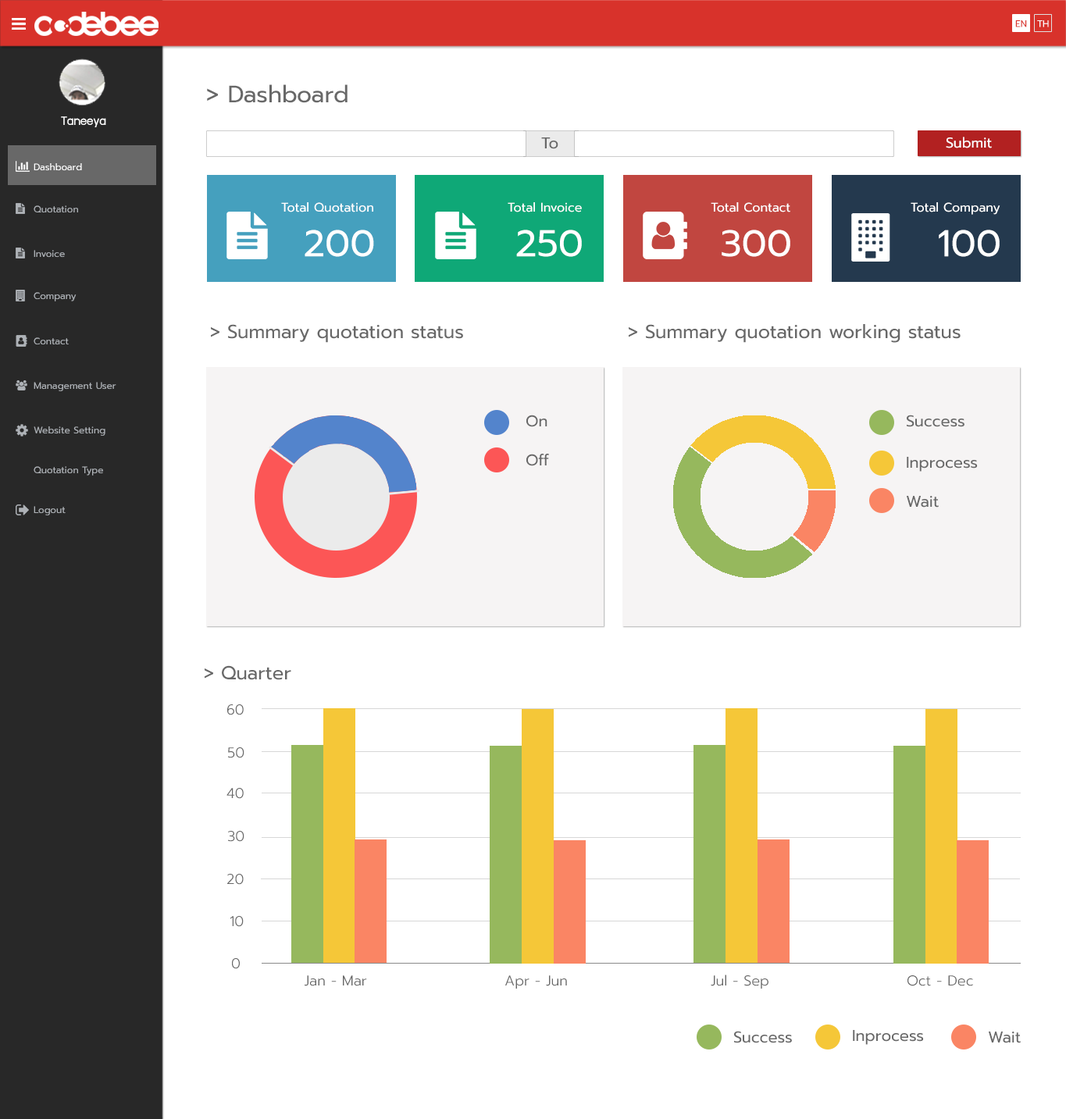
<style>
.page{position:relative;width:1066px;height:1119px;background:#ffffff}
.page>*{position:absolute;margin:0}
.t1{font:9.4px "Prompt-Regular";color:#d8322b}
.t2{font:9.4px "Prompt-Regular";color:#ffffff}
.t3{font:23.4px "Prompt-Regular";color:#686868}
.t4{font:14.1px "supermarket";color:#ffffff}
.t5{font:15.6px "Prompt-Regular";color:#686868}
.t6{font:14.1px "Prompt-Regular";color:#ffffff}
.t7{font:9.4px "Prompt-Regular";color:#aeb2b7}
.t8{font:12.5px "Prompt-Regular";color:#ffffff}
.t9{font:37.5px "Prompt-Regular";color:#ffffff}
.t10{font:18.7px "Prompt-Regular";color:#686868}
.t11{font:14.1px "Prompt-Light";color:#686868}
</style>
<div class="page">
<p class="t1" style="left:1015px;top:20px;width:12px;height:7px">EN</p>
<p class="t2" style="left:1037px;top:20px;width:12px;height:7px">TH</p>
<p class="t3" style="left:207px;top:84px;width:140px;height:19px">&gt; Dashboard</p>
<p class="t4" style="left:61px;top:116px;width:45px;height:11px">Taneeya</p>
<p class="t5" style="left:541px;top:137px;width:17px;height:12px">To</p>
<p class="t6" style="left:946px;top:137px;width:46px;height:11px">Submit</p>
<p class="t2" style="left:34px;top:163px;width:48px;height:8px">Dashboard</p>
<p class="t7" style="left:34px;top:205px;width:44px;height:8px">Quotation</p>
<p class="t8" style="left:281px;top:202px;width:92px;height:10px">Total Quotation</p>
<p class="t8" style="left:508px;top:202px;width:74px;height:10px">Total Invoice</p>
<p class="t8" style="left:711px;top:202px;width:79px;height:10px">Total Contact</p>
<p class="t8" style="left:910px;top:202px;width:90px;height:13px">Total Company</p>
<p class="t9" style="left:305px;top:230px;width:69px;height:27px">200</p>
<p class="t9" style="left:516px;top:230px;width:66px;height:27px">250</p>
<p class="t9" style="left:721px;top:230px;width:69px;height:27px">300</p>
<p class="t9" style="left:938px;top:230px;width:61px;height:27px">100</p>
<p class="t7" style="left:34px;top:250px;width:31px;height:8px">Invoice</p>
<p class="t7" style="left:34px;top:292px;width:43px;height:9px">Company</p>
<p class="t10" style="left:211px;top:324px;width:252px;height:19px">&gt; Summary quotation status</p>
<p class="t10" style="left:629px;top:324px;width:331px;height:19px">&gt; Summary quotation working status</p>
<p class="t7" style="left:34px;top:337px;width:35px;height:8px">Contact</p>
<p class="t7" style="left:34px;top:382px;width:82px;height:9px">Management User</p>
<p class="t5" style="left:526px;top:415px;width:21px;height:12px">On</p>
<p class="t5" style="left:906px;top:415px;width:58px;height:12px">Success</p>
<p class="t7" style="left:34px;top:426px;width:71px;height:10px">Website Setting</p>
<p class="t5" style="left:526px;top:454px;width:23px;height:12px">Off</p>
<p class="t5" style="left:906px;top:457px;width:72px;height:15px">Inprocess</p>
<p class="t7" style="left:34px;top:466px;width:69px;height:9px">Quotation Type</p>
<p class="t5" style="left:906px;top:496px;width:32px;height:12px">Wait</p>
<p class="t7" style="left:34px;top:506px;width:32px;height:9px">Logout</p>
<p class="t10" style="left:205px;top:665px;width:86px;height:15px">&gt; Quarter</p>
<p class="t11" style="left:227px;top:704px;width:17px;height:11px">60</p>
<p class="t11" style="left:228px;top:747px;width:16px;height:11px">50</p>
<p class="t11" style="left:226px;top:788px;width:18px;height:11px">40</p>
<p class="t11" style="left:228px;top:831px;width:16px;height:11px">30</p>
<p class="t11" style="left:227px;top:874px;width:17px;height:11px">20</p>
<p class="t11" style="left:230px;top:916px;width:14px;height:11px">10</p>
<p class="t11" style="left:232px;top:958px;width:8px;height:11px">0</p>
<p class="t11" style="left:305px;top:975px;width:62px;height:11px">Jan - Mar</p>
<p class="t11" style="left:505px;top:975px;width:62px;height:13px">Apr - Jun</p>
<p class="t11" style="left:711px;top:974px;width:57px;height:14px">Jul - Sep</p>
<p class="t11" style="left:907px;top:975px;width:66px;height:11px">Oct - Dec</p>
<p class="t5" style="left:734px;top:1031px;width:58px;height:12px">Success</p>
<p class="t5" style="left:853px;top:1030px;width:71px;height:15px">Inprocess</p>
<p class="t5" style="left:988px;top:1031px;width:32px;height:12px">Wait</p>
</div>
